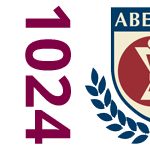
<style>
.page{position:relative;width:150px;height:150px;background:#ffffff}
.page>*{position:absolute;margin:0}
.t1{font:62.5px "OpenSans-Bold";color:#800144;text-transform:uppercase}
</style>
<div class="page">
<p class="t1" style="left:25px;top:5px;width:46px;height:139px;rotate:90deg">1024</p>
</div>
